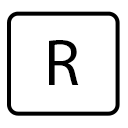
<style>
.page{position:relative;width:128px;height:128px;background:#ffffff}
.page>*{position:absolute;margin:0}
.t1{font:66.7px "MyriadPro-Regular";color:#000000}
</style>
<div class="page">
<p class="t1" style="left:49px;top:40px;width:30px;height:45px">R</p>
</div>
